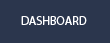
<style>
.page{position:relative;width:110px;height:43px;background:#2b364d}
.page>*{position:absolute;margin:0}
.t1{font:12px "MyriadPro-Regular";color:#ffffff}
</style>
<div class="page">
<p class="t1" style="left:21px;top:16px;width:66px;height:9px">DASHBOARD</p>
</div>
